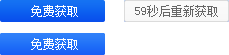
<style>
.page{position:relative;width:229px;height:55px;background:#ffffff}
.page>*{position:absolute;margin:0}
.t1{font:12px "SimSun";color:#feffff}
.t2{font:12px "SimSun";color:#666666}
</style>
<div class="page">
<p class="t1" style="left:31px;top:5px;width:47px;height:12px">免费获取</p>
<p class="t2" style="left:135px;top:5px;width:83px;height:12px">59秒后重新获取</p>
<p class="t1" style="left:31px;top:38px;width:47px;height:12px">免费获取</p>
</div>
